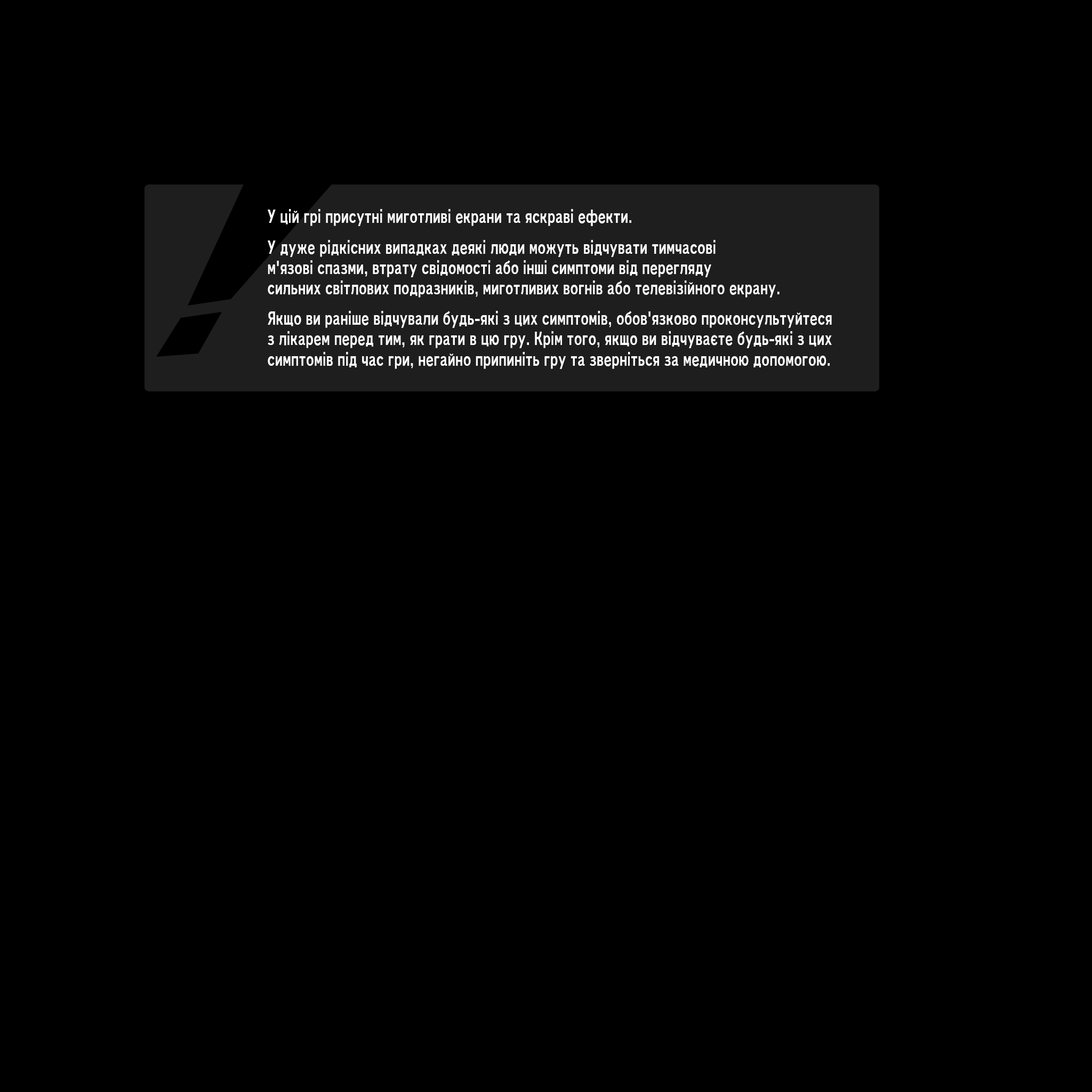
<style>
.page{position:relative;width:1092px;height:1092px;background:#000000}
.page>*{position:absolute;margin:0}
.t1{font:17px "RodinPro-B";color:#ffffff;scale:0.7 1}
</style>
<div class="page">
<p class="t1" style="left:268px;top:209px;width:363px;height:17px">У цій грі присутні миготливі екрани та яскраві ефекти.</p>
<p class="t1" style="left:268px;top:240px;width:512px;height:58px">У дуже рідкісних випадках деякі люди можуть відчувати тимчасові <br>м'язові спазми, втрату свідомості або інші симптоми від перегляду <br>сильних світлових подразників, миготливих вогнів або телевізійного екрану.</p>
<p class="t1" style="left:268px;top:311px;width:564px;height:58px">Якщо ви раніше відчували будь-які з цих симптомів, обов'язково проконсультуйтеся<br>з лікарем перед тим, як грати в цю гру. Крім того, якщо ви відчуваєте будь-які з цих<br>симптомів під час гри, негайно припиніть гру та зверніться за медичною допомогою.</p>
</div>
